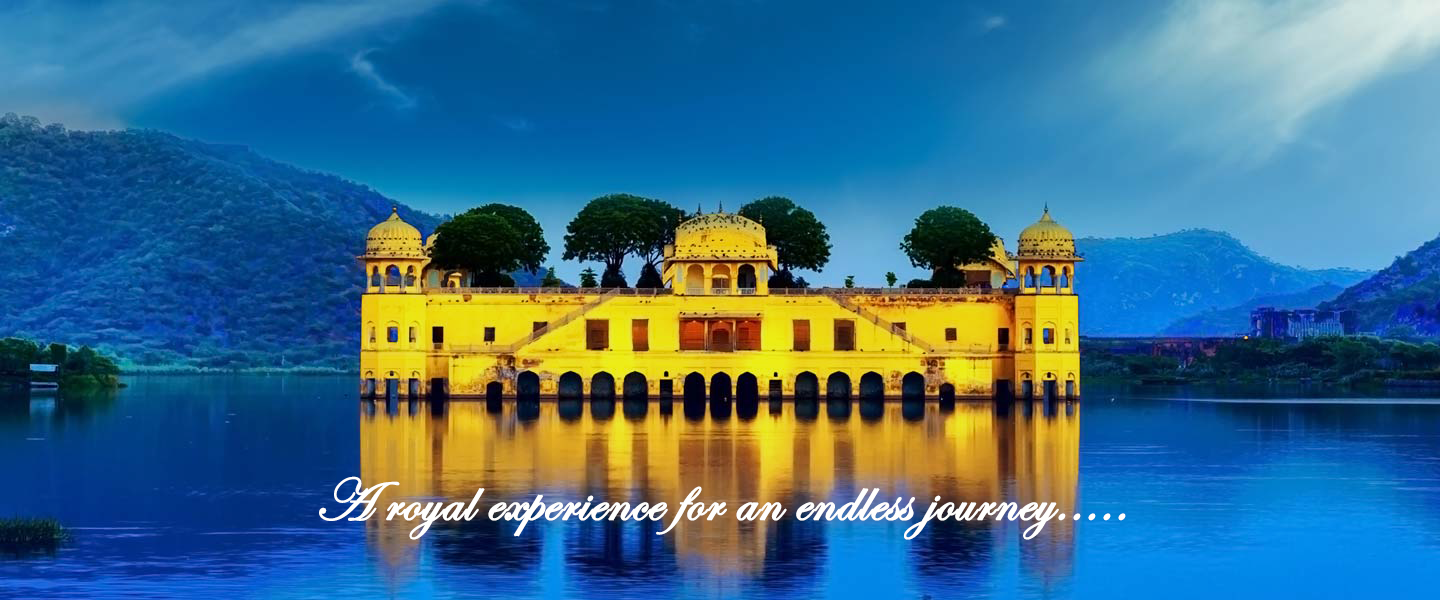
<style>
.page{position:relative;width:1440px;height:600px}
.page>*{position:absolute;margin:0}
.t1{font:60px "EdwardianScriptITC";color:#fefefd;font-weight:bold}
</style>
<div class="page">
<p class="t1" style="left:319px;top:476px;width:807px;height:64px">A royal experience for an endless journey.....</p>
</div>
